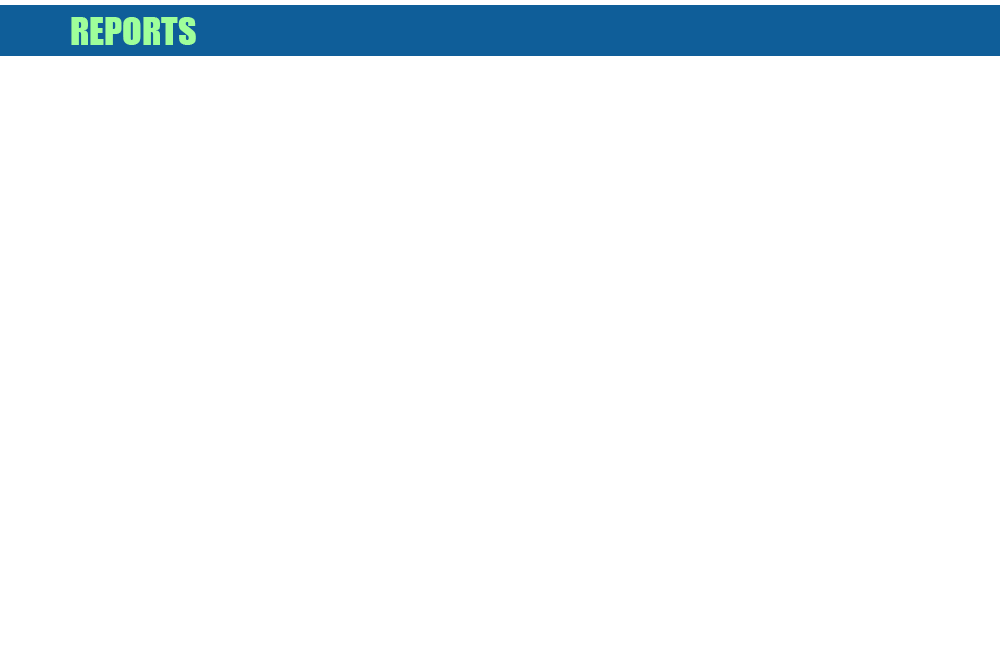
<style>
.page{position:relative;width:1000px;height:650px;background:#ffffff}
.page>*{position:absolute;margin:0}
.t1{font:36px "Impact";color:#9fff9a}
</style>
<div class="page">
<p class="t1" style="left:71px;top:17px;width:125px;height:28px">REPORTS</p>
</div>
